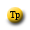
<style>
.page{position:relative;width:30px;height:30px;background:#ffffff}
.page>*{position:absolute;margin:0}
.t1{font:9px "IskoolaPota";color:#000000}
</style>
<div class="page">
<p class="t1" style="left:10px;top:11px;width:10px;height:9px">Tp</p>
</div>
